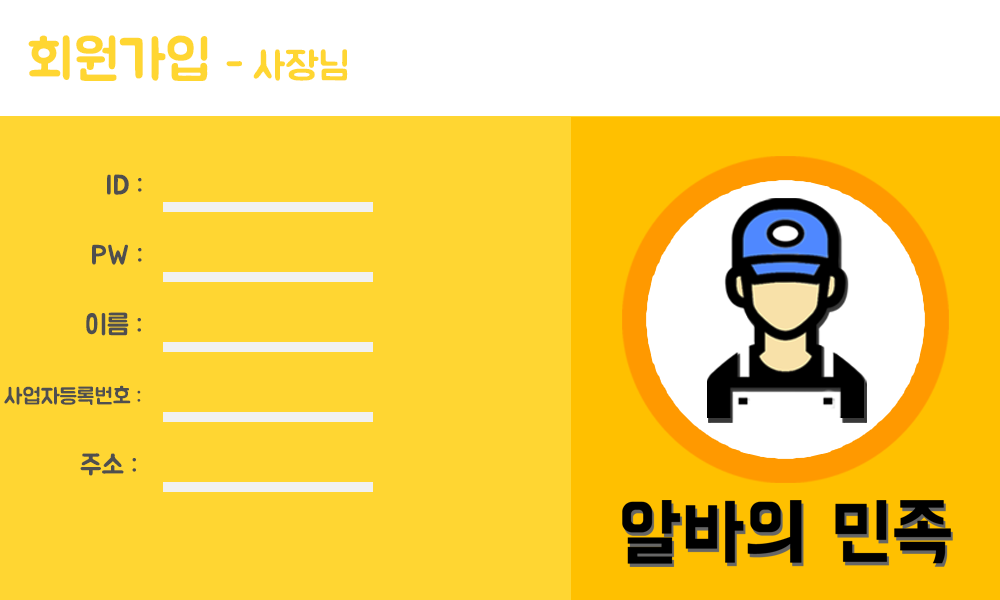
<style>
.page{position:relative;width:1000px;height:600px;background:#ffd632}
.page>*{position:absolute;margin:0}
.t1{font:55.6px "BMJUA";color:#ffd632}
.t2{font:38.9px "BMJUA";color:#ffd632}
.t3{font:27.8px "BMJUA";color:#4f4f4f}
.t4{font:22.2px "BMJUA";color:#4f4f4f}
</style>
<div class="page">
<p class="t1" style="left:28px;top:35px;width:180px;height:46px">회원가입</p>
<p class="t2" style="left:226px;top:49px;width:122px;height:32px">- 사장님</p>
<p class="t3" style="left:107px;top:174px;width:35px;height:21px">ID :</p>
<p class="t3" style="left:92px;top:244px;width:50px;height:21px">PW :</p>
<p class="t3" style="left:86px;top:312px;width:55px;height:24px">이름 :</p>
<p class="t4" style="left:4px;top:385px;width:137px;height:20px">사업자등록번호 :</p>
<p class="t3" style="left:80px;top:453px;width:56px;height:23px">주소 :</p>
</div>
